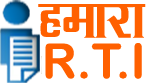
<style>
.page{position:relative;width:146px;height:83px;background:#ffffff}
.page>*{position:absolute;margin:0}
.t1{font:60px "KrutiDev090";color:#ff6000}
.t2{font:48px "ArialRoundedMTBold";color:#ff6000}
</style>
<div class="page">
<p class="t1" style="left:38px;top:4px;width:108px;height:34px">gekjk</p>
<p class="t2" style="left:45px;top:43px;width:97px;height:36px">R.T.I</p>
</div>
